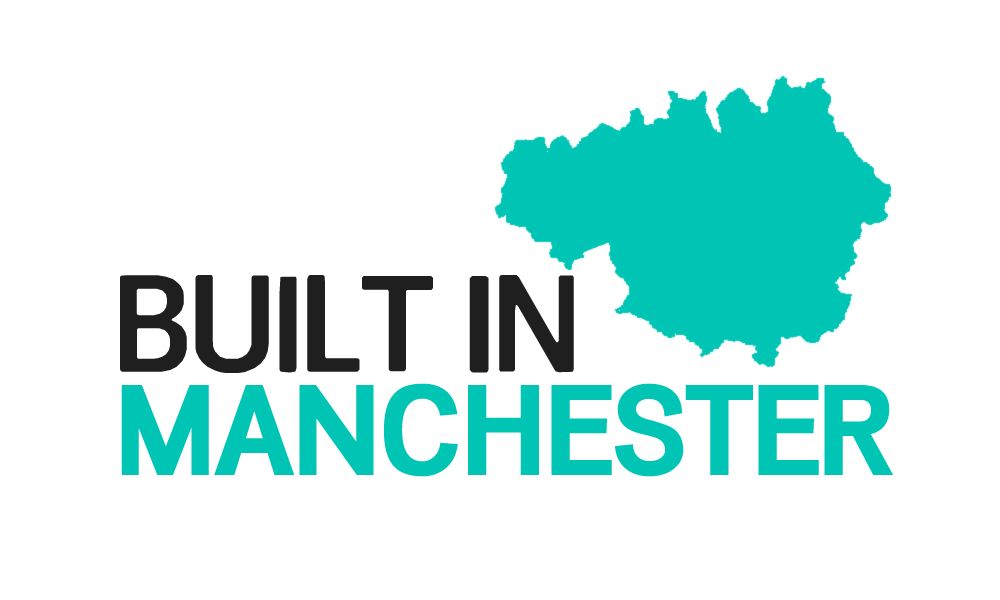
<style>
.page{position:relative;width:1000px;height:600px;background:#ffffff}
.page>*{position:absolute;margin:0}
.t1{font:131.5px "Telephoto-Regular";color:#1f1f1f}
.t2{font:130px "DivulgeRg-Bold";letter-spacing:-0.04em;color:#00c5b4}
</style>
<div class="page">
<p class="t1" style="left:120px;top:275px;width:454px;height:98px">BUILT IN</p>
<p class="t2" style="left:121px;top:383px;width:772px;height:94px">MANCHESTER</p>
</div>
